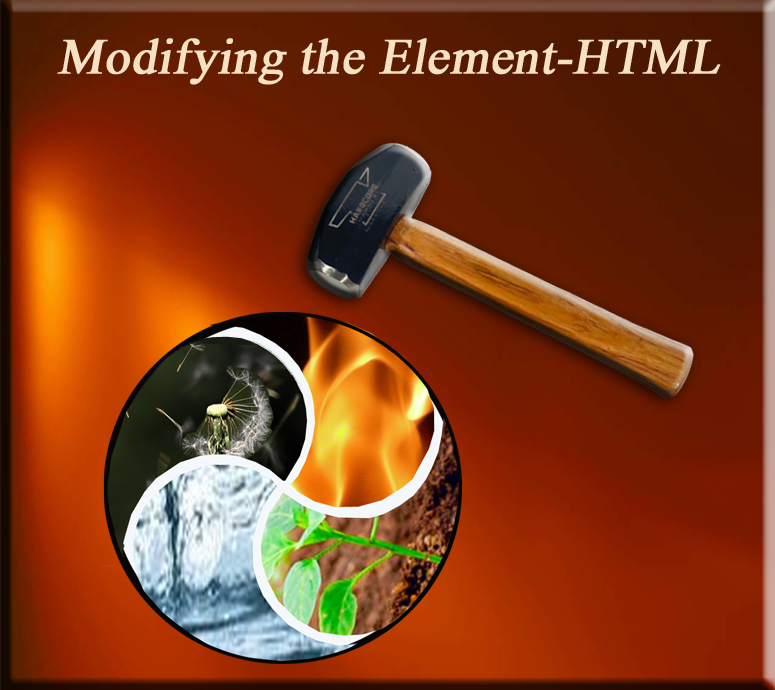
<style>
.page{position:relative;width:775px;height:690px}
.page>*{position:absolute;margin:0}
.t1{font:50px "TimesNewRomanPSMT";color:#f6e1c2;font-weight:bold;font-style:italic}
</style>
<div class="page">
<p class="t1" style="left:57px;top:38px;width:664px;height:47px">Modifying the Element-HTML</p>
</div>
